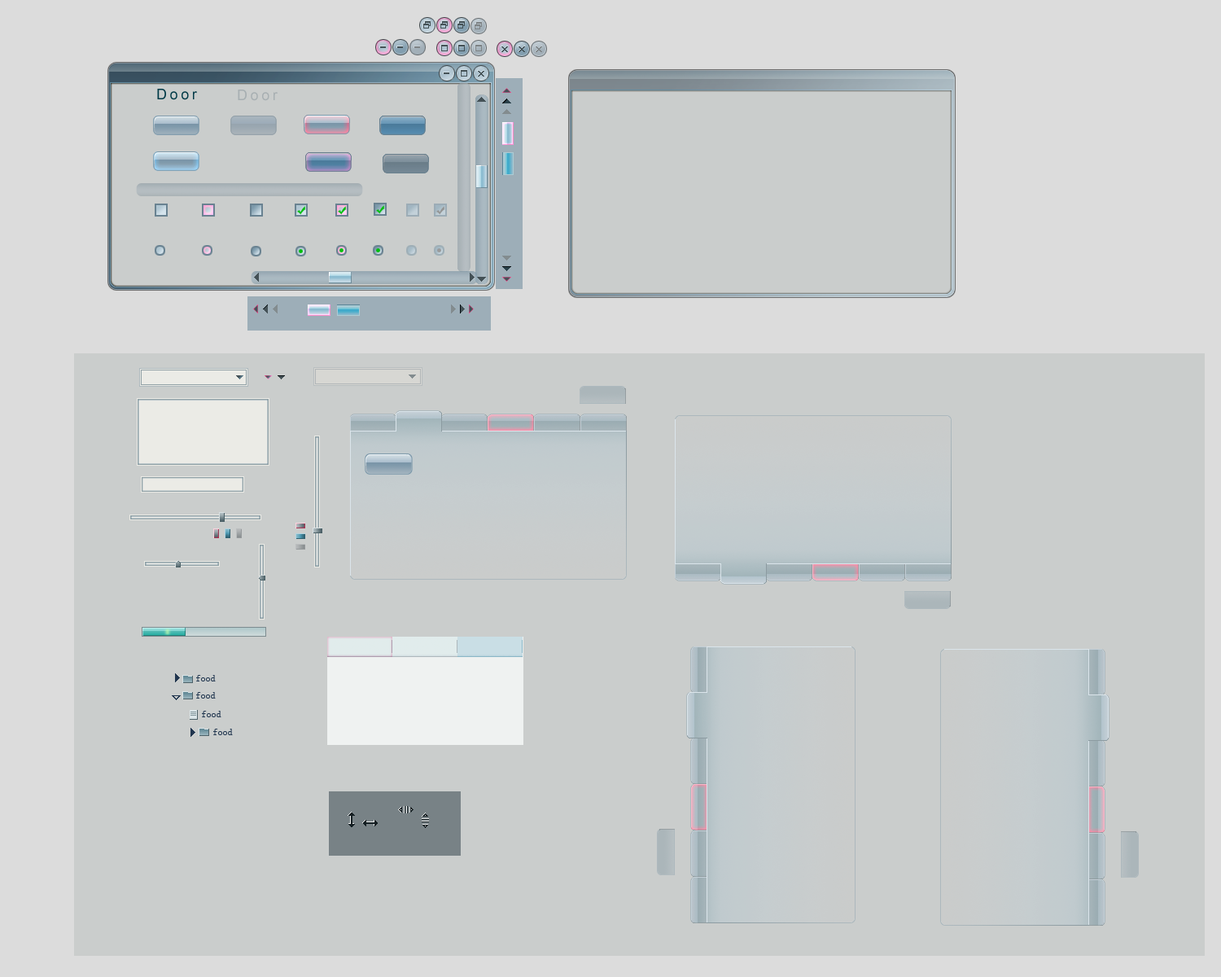
<style>
.page{position:relative;width:1221px;height:977px;background:#cacdcc}
.page>*{position:absolute;margin:0}
.t1{font:14.7px "ArialMT";letter-spacing:0.2em;color:#003a47}
.t2{font:14.7px "ArialMT";letter-spacing:0.2em;color:#a7afb2}
.t3{font:9.8px "SimSun";color:#21364f}
</style>
<div class="page">
<p class="t1" style="left:157px;top:89px;width:40px;height:11px">Door</p>
<p class="t2" style="left:238px;top:90px;width:40px;height:11px">Door</p>
<p class="t3" style="left:196px;top:675px;width:20px;height:6px">food</p>
<p class="t3" style="left:196px;top:692px;width:20px;height:6px">food</p>
<p class="t3" style="left:202px;top:711px;width:19px;height:6px">food</p>
<p class="t3" style="left:213px;top:728px;width:20px;height:7px">food</p>
</div>
